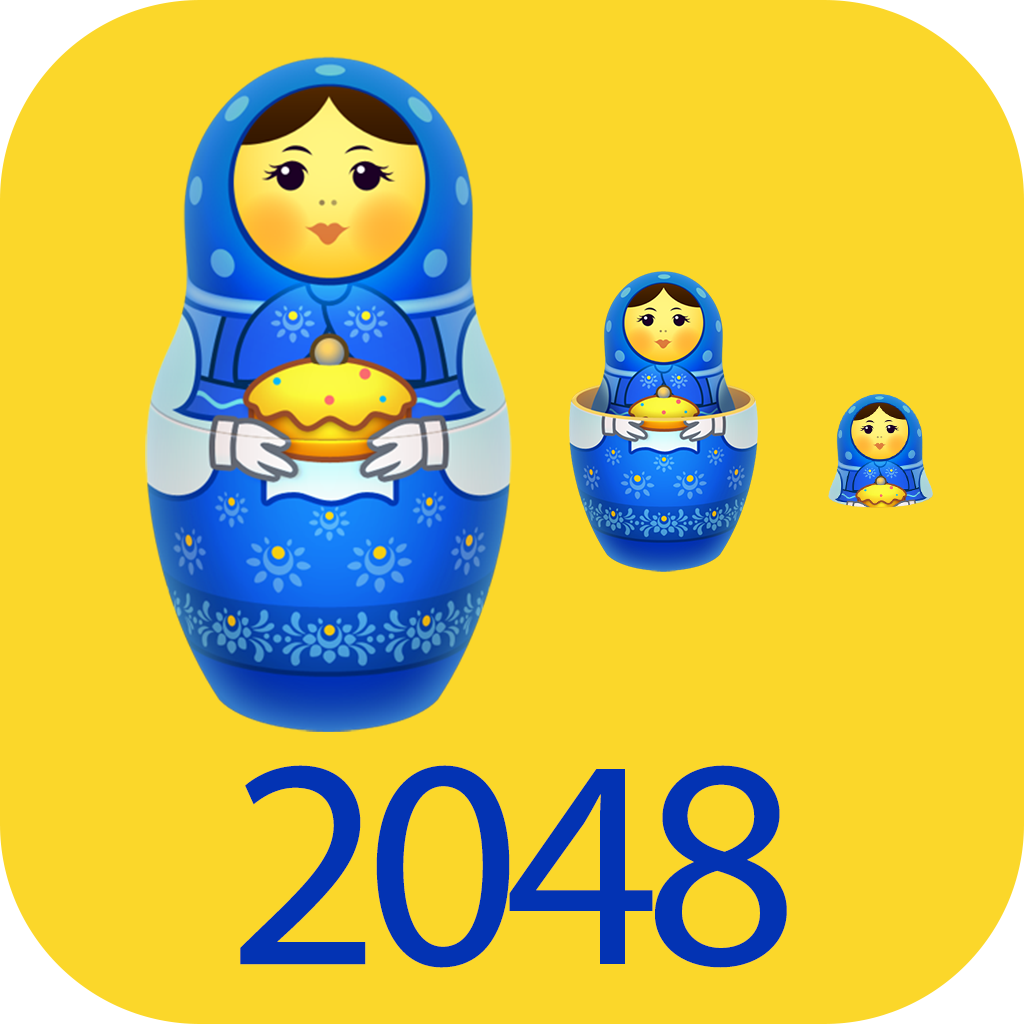
<style>
.page{position:relative;width:1024px;height:1024px;background:#fbd72a}
.page>*{position:absolute;margin:0}
.t1{font:300px "MyriadPro-Regular";letter-spacing:-0.05em;color:#0333b3;text-transform:uppercase}
</style>
<div class="page">
<p class="t1" style="left:240px;top:765px;width:547px;height:203px">2048</p>
</div>
